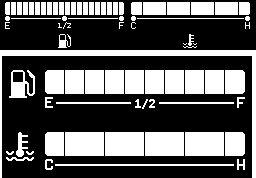
<style>
.page{position:relative;width:256px;height:178px;background:#000000}
.page>*{position:absolute;margin:0}
.t1{font:12px "ProFontWindows";color:#ffffff}
.t2{font:9px "ProFontWindows";color:#ffffff}
.t3{font:18px "ProFontWindows";color:#ffffff}
.t4{font:15px "ProFontWindows";color:#ffffff}
</style>
<div class="page">
<p class="t1" style="left:5px;top:22px;width:5px;height:7px">E</p>
<p class="t2" style="left:58px;top:22px;width:13px;height:8px">1/2</p>
<p class="t1" style="left:119px;top:22px;width:5px;height:7px">F</p>
<p class="t1" style="left:131px;top:22px;width:5px;height:7px">C</p>
<p class="t1" style="left:245px;top:22px;width:5px;height:7px">H</p>
<p class="t3" style="left:45px;top:97px;width:8px;height:11px">E</p>
<p class="t4" style="left:134px;top:98px;width:22px;height:13px">1/2</p>
<p class="t3" style="left:237px;top:97px;width:8px;height:11px">F</p>
<p class="t3" style="left:45px;top:159px;width:8px;height:11px">C</p>
<p class="t3" style="left:237px;top:159px;width:8px;height:11px">H</p>
</div>
